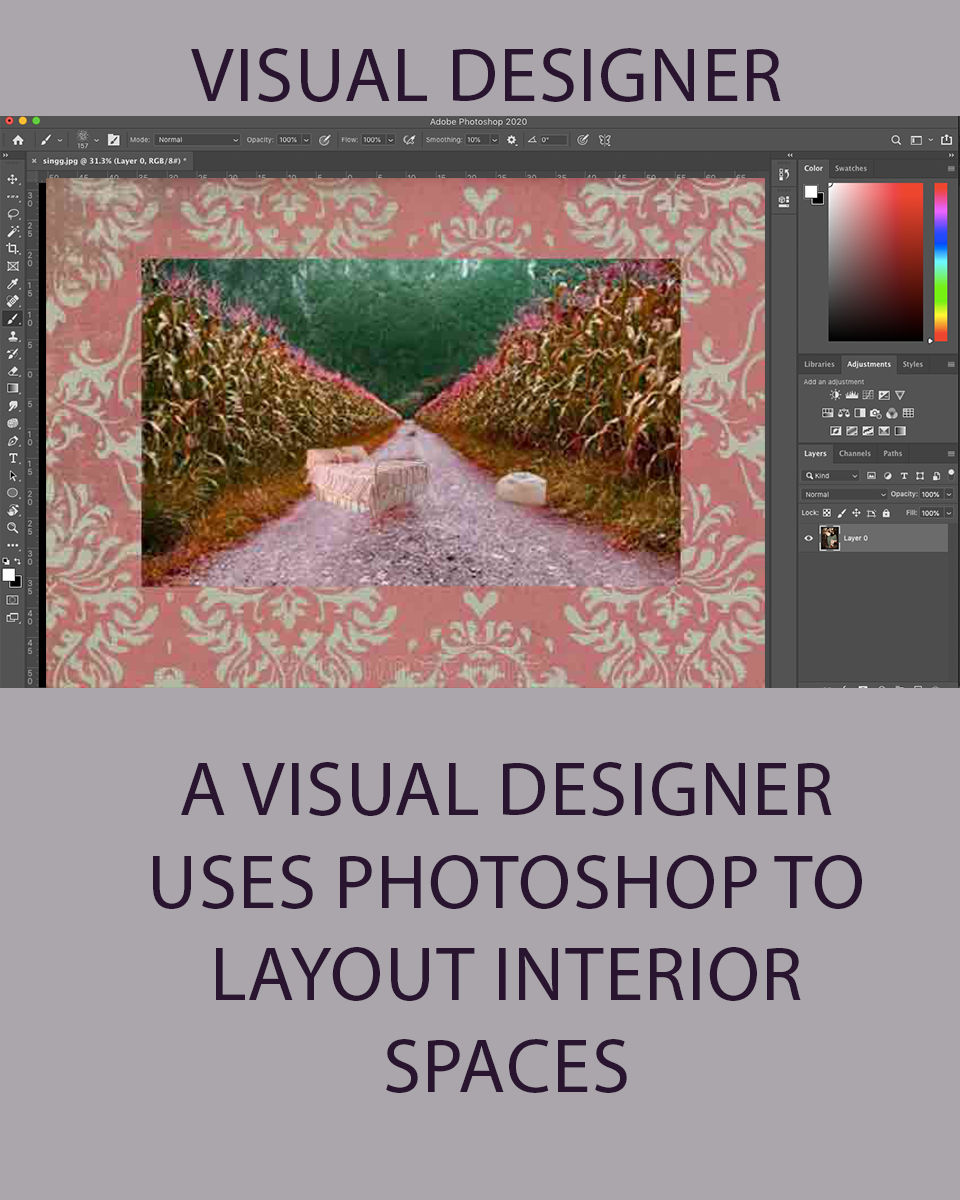
<style>
.page{position:relative;width:960px;height:1200px;background:#aaa6ab}
.page>*{position:absolute;margin:0}
.t1{font:77px "MyriadPro-Regular";color:#2a1531;text-transform:uppercase}
</style>
<div class="page">
<p class="t1" style="left:191px;top:48px;width:590px;height:54px">visual designer</p>
<p class="t1" style="left:153px;top:762px;width:709px;height:331px;text-align:center">a visual designer uses photoshop to layout interior spaces</p>
</div>
